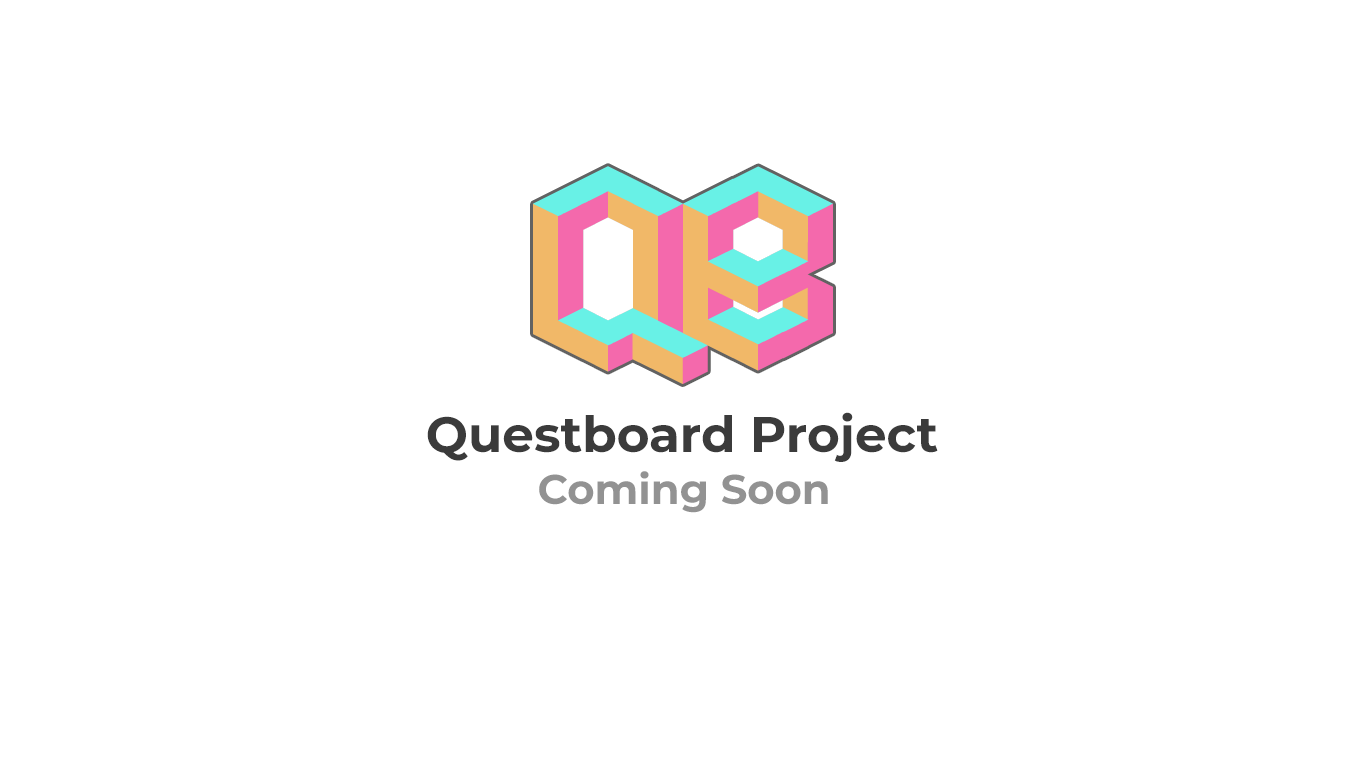
<style>
.page{position:relative;width:1366px;height:768px;background:#ffffff}
.page>*{position:absolute;margin:0}
.t1{font:50px "Montserrat-Bold";color:#3b3b3b}
.t2{font:41.7px "Montserrat-Bold";color:#929292}
</style>
<div class="page">
<p class="t1" style="left:427px;top:412px;width:511px;height:50px">Questboard Project</p>
<p class="t2" style="left:539px;top:471px;width:289px;height:42px">Coming Soon</p>
</div>
